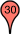
<style>
.page{position:relative;width:20px;height:34px;background:#ffffff}
.page>*{position:absolute;margin:0}
.t1{font:11px "HelveticaNeue";letter-spacing:-0.025em;color:#000000}
</style>
<div class="page">
<p class="t1" style="left:4px;top:5px;width:12px;height:9px">30</p>
</div>
